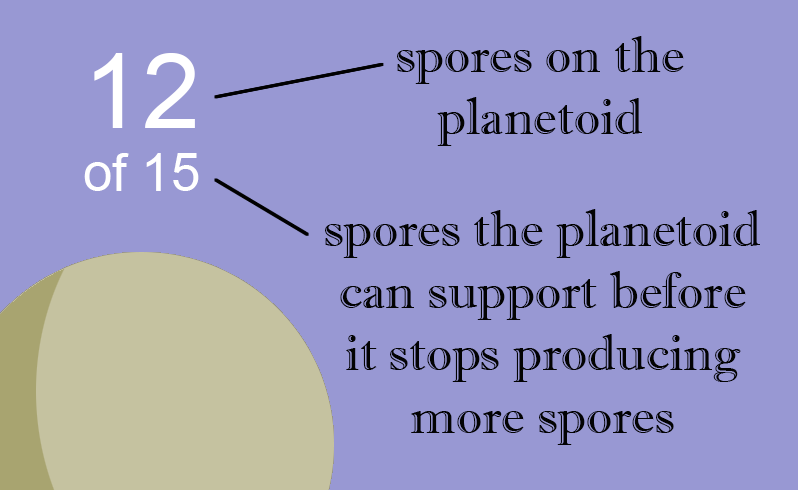
<style>
.page{position:relative;width:798px;height:490px;background:#9898d3}
.page>*{position:absolute;margin:0}
.t1{font:52px "ImprintMT-Shadow";color:#030303}
.t2{font:52.6px "ArialMT";color:#ffffff}
.t3{font:105.1px "ArialMT";color:#ffffff}
</style>
<div class="page">
<p class="t1" style="left:397px;top:36px;width:287px;height:110px;text-align:center">spores on the<br>planetoid</p>
<p class="t2" style="left:84px;top:53px;width:115px;height:138px;text-align:center"><span class="t3">12<br></span>of 15</p>
<p class="t1" style="left:325px;top:209px;width:435px;height:236px;text-align:center">spores the planetoid<br>can support before<br>it stops producing<br>more spores</p>
</div>
